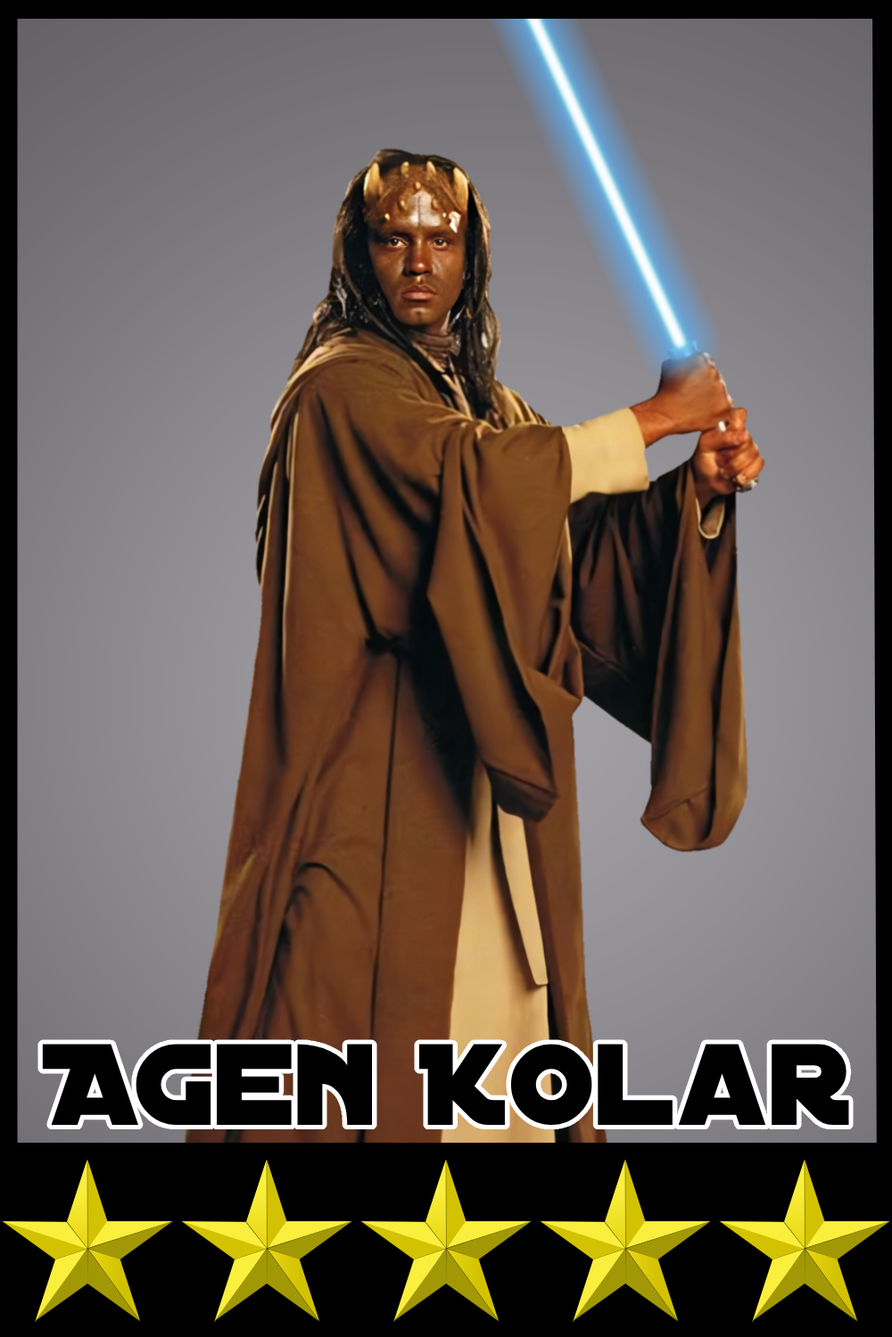
<style>
.page{position:relative;width:892px;height:1337px}
.page>*{position:absolute;margin:0}
.t1{font:124.1px "DistantGalaxy";color:#000000}
</style>
<div class="page">
<p class="t1" style="left:42px;top:1044px;width:807px;height:81px">Agen Kolar</p>
</div>
